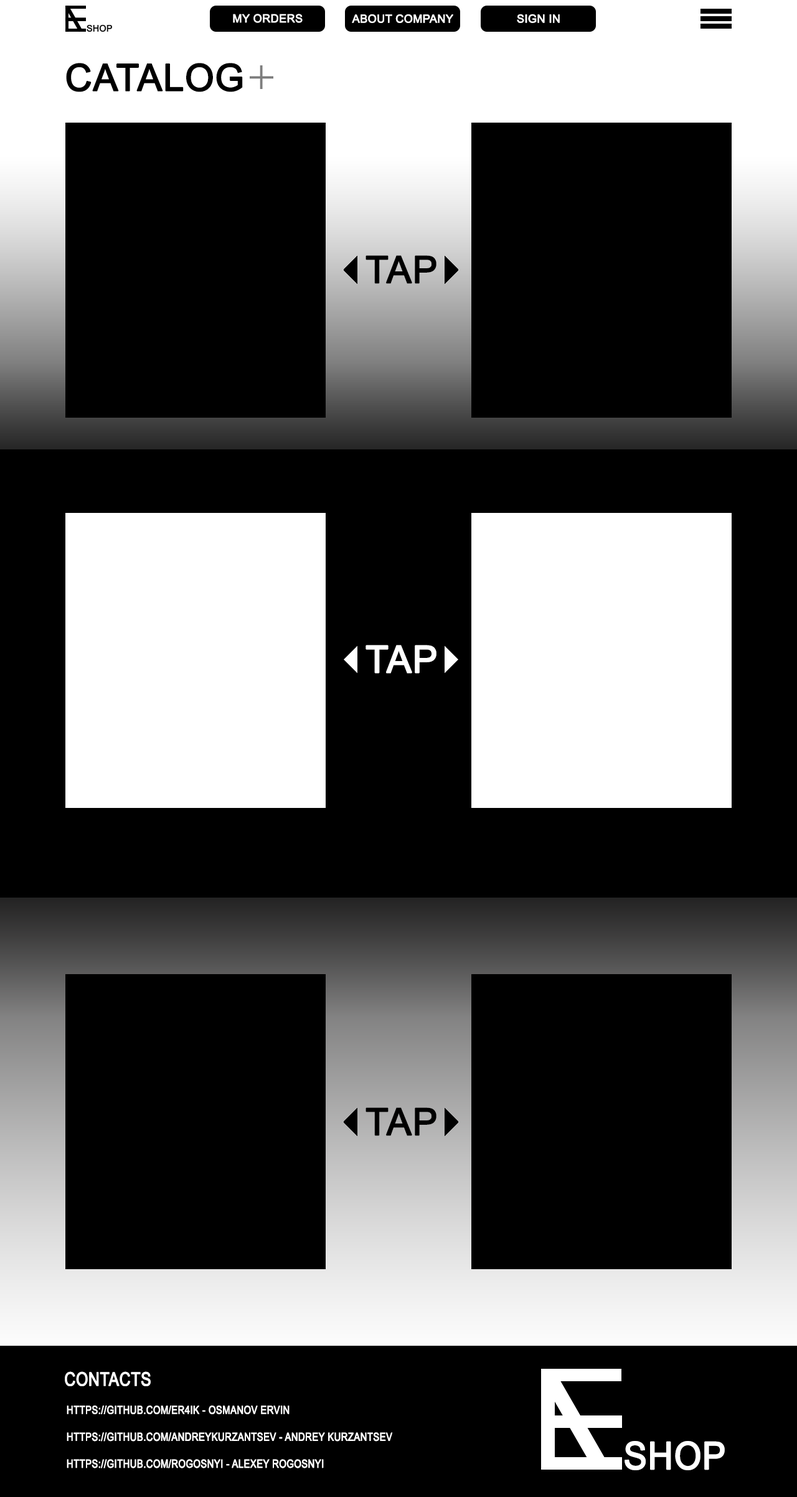
<style>
.page{position:relative;width:797px;height:1497px;background:#000000}
.page>*{position:absolute;margin:0}
.t1{font:11.2px "ArialMT";color:#ffffff;text-transform:uppercase;font-weight:bold}
.t2{font:37.3px "ArialMT";color:#000000;text-transform:uppercase;font-weight:bold}
.t3{font:37.3px "ArialMT";color:#ffffff;text-transform:uppercase;font-weight:bold}
.t4{font:18.7px "ArialNarrow";color:#ffffff;text-transform:uppercase;font-weight:bold}
.t5{font:11.2px "ArialNarrow";color:#ffffff;text-transform:uppercase;font-weight:bold}
.t6{font:37.9px "ArialNarrow";color:#ffffff;text-transform:uppercase;font-weight:bold;scale:1.12 1}
</style>
<div class="page">
<p class="t1" style="left:233px;top:14px;width:69px;height:9px">My orders</p>
<p class="t1" style="left:352px;top:14px;width:101px;height:9px">About company</p>
<p class="t1" style="left:517px;top:14px;width:43px;height:9px">Sign In</p>
<p class="t2" style="left:66px;top:63px;width:177px;height:29px">catalog</p>
<p class="t2" style="left:365px;top:255px;width:71px;height:29px">tap</p>
<p class="t3" style="left:365px;top:645px;width:71px;height:28px">tap</p>
<p class="t2" style="left:365px;top:1107px;width:71px;height:29px">tap</p>
<p class="t4" style="left:65px;top:1371px;width:86px;height:15px">contacts</p>
<p class="t5" style="left:67px;top:1405px;width:326px;height:63px">https://github.com/Er4ik - Osmanov Ervin<br><br>https://github.com/andreykurzantsev - Andrey Kurzantsev<br><br>https://github.com/rogosnyi - Alexey Rogosnyi</p>
<p class="t6" style="left:624px;top:1441px;width:100px;height:29px">Shop</p>
</div>
